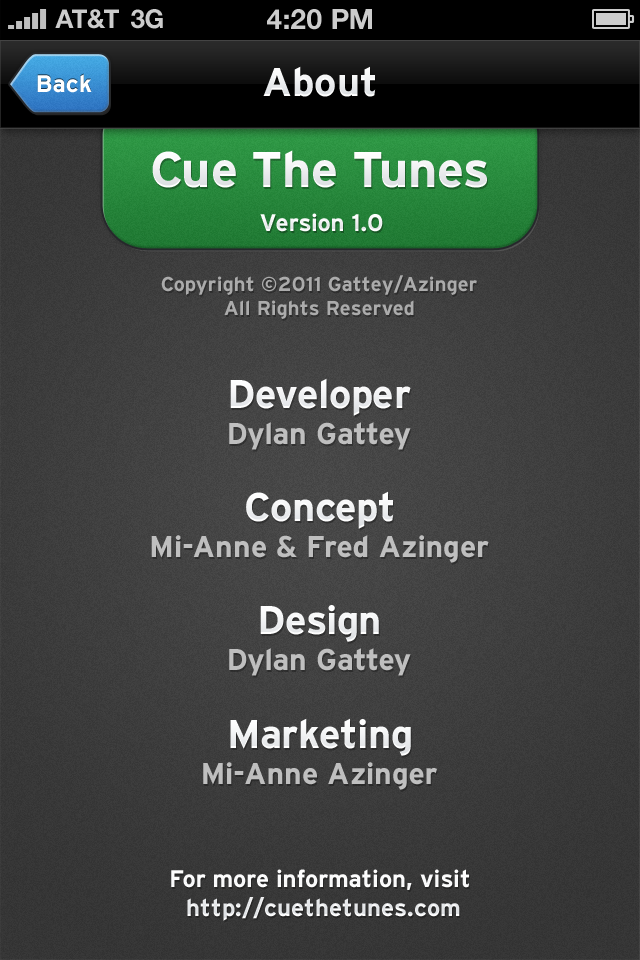
<style>
.page{position:relative;width:640px;height:960px}
.page>*{position:absolute;margin:0}
.t1{font:26px "HelveticaNeue-Bold";color:#cccccc;text-transform:uppercase}
.t2{font:28px "HelveticaNeue-Bold";color:#cccccc;text-transform:uppercase}
.t3{font:24px "Interstate-Bold";color:#ffffff}
.t4{font:40px "Interstate-Bold";color:#ffffff}
.t5{font:50px "Interstate-Bold";color:#ffffff}
.t6{font:24px "Interstate-Bold";color:#f4f5f6}
.t7{font:20px "Interstate-Bold";color:#ababab}
.t8{font:30px "Interstate-Bold";color:#bfbfbf}
</style>
<div class="page">
<p class="t1" style="left:55px;top:9px;width:64px;height:20px">AT&amp;T</p>
<p class="t1" style="left:131px;top:9px;width:32px;height:20px">3G</p>
<p class="t2" style="left:267px;top:9px;width:105px;height:21px">4:20 pM</p>
<p class="t3" style="left:37px;top:74px;width:55px;height:19px">Back</p>
<p class="t4" style="left:263px;top:66px;width:113px;height:31px">About</p>
<p class="t5" style="left:152px;top:150px;width:335px;height:38px">Cue The Tunes</p>
<p class="t6" style="left:260px;top:213px;width:123px;height:19px">Version 1.0</p>
<p class="t7" style="left:161px;top:275px;width:316px;height:44px;text-align:center">Copyright ©2011 Gattey/Azinger<br>All Rights Reserved</p>
<p class="t4" style="left:230px;top:378px;width:181px;height:38px">Developer</p>
<p class="t8" style="left:229px;top:422px;width:182px;height:28px">Dylan Gattey</p>
<p class="t4" style="left:246px;top:491px;width:148px;height:38px">Concept</p>
<p class="t8" style="left:151px;top:535px;width:338px;height:28px">Mi-Anne &amp; Fred Azinger</p>
<p class="t4" style="left:260px;top:605px;width:119px;height:37px">Design</p>
<p class="t8" style="left:229px;top:648px;width:182px;height:28px">Dylan Gattey</p>
<p class="t4" style="left:230px;top:718px;width:181px;height:38px">Marketing</p>
<p class="t8" style="left:203px;top:762px;width:234px;height:28px">Mi-Anne Azinger</p>
<p class="t3" style="left:171px;top:869px;width:298px;height:52px;text-align:center">For more information, visit<br> http://cuethetunes.com</p>
</div>
